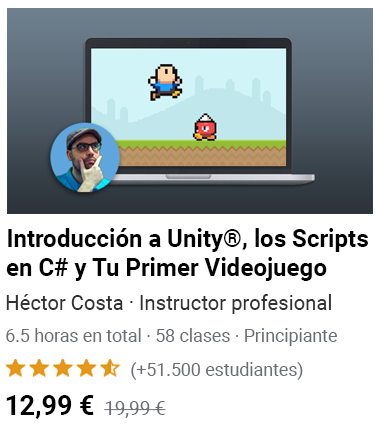
<style>
.page{position:relative;width:380px;height:425px;background:#ffffff}
.page>*{position:absolute;margin:0}
.t1{font:24.7px/28.8px "Roboto-Bold";color:#000000}
.t2{font:20.7px "Roboto-Regular";color:#303335}
.t3{font:18.3px "Roboto-Regular";color:#6a6f73;scale:0.97 1}
.t4{font:18.2px "Roboto-Regular";color:#6a6f73}
.t5{font:27.7px "Roboto-Bold";color:#000000;scale:0.97 1}
.t6{font:19.4px "Roboto-Regular";color:#6a6f73}
</style>
<div class="page">
<p class="t1" style="left:6px;top:228px;width:362px;height:53px">Introducción a Unity®, los Scripts en C# y Tu Primer Videojuego</p>
<p class="t2" style="left:6px;top:294px;width:325px;height:20px">Héctor Costa · Instructor profesional</p>
<p class="t3" style="left:6px;top:328px;width:331px;height:18px">6.5 horas en total · 58 clases · Principiante</p>
<p class="t4" style="left:131px;top:362px;width:172px;height:18px">(+51.500 estudiantes)</p>
<p class="t5" style="left:6px;top:395px;width:88px;height:24px">12,99 €</p>
<p class="t6" style="left:104px;top:401px;width:62px;height:17px">19,99 €</p>
</div>
